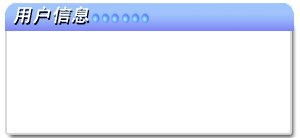
<style>
.page{position:relative;width:300px;height:138px;background:#ffffff}
.page>*{position:absolute;margin:0}
.t1{font:18px "SimHei";color:#ffffff;font-weight:bold;font-style:italic;scale:1.04 1}
</style>
<div class="page">
<p class="t1" style="left:13px;top:6px;width:76px;height:17px">用户信息</p>
</div>
